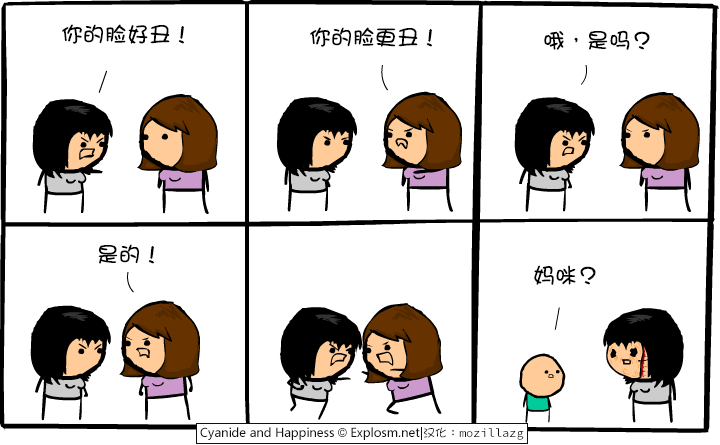
<style>
.page{position:relative;width:720px;height:445px;background:#ffffff}
.page>*{position:absolute;margin:0}
.t1{font:22px "DFGirl";color:#000000}
</style>
<div class="page">
<p class="t1" style="left:62px;top:24px;width:123px;height:20px">你的脸好丑！</p>
<p class="t1" style="left:310px;top:27px;width:123px;height:20px">你的脸更丑！</p>
<p class="t1" style="left:544px;top:30px;width:106px;height:20px">哦，是吗？</p>
<p class="t1" style="left:98px;top:244px;width:57px;height:20px">是的！</p>
<p class="t1" style="left:534px;top:265px;width:62px;height:20px">妈咪？</p>
</div>
